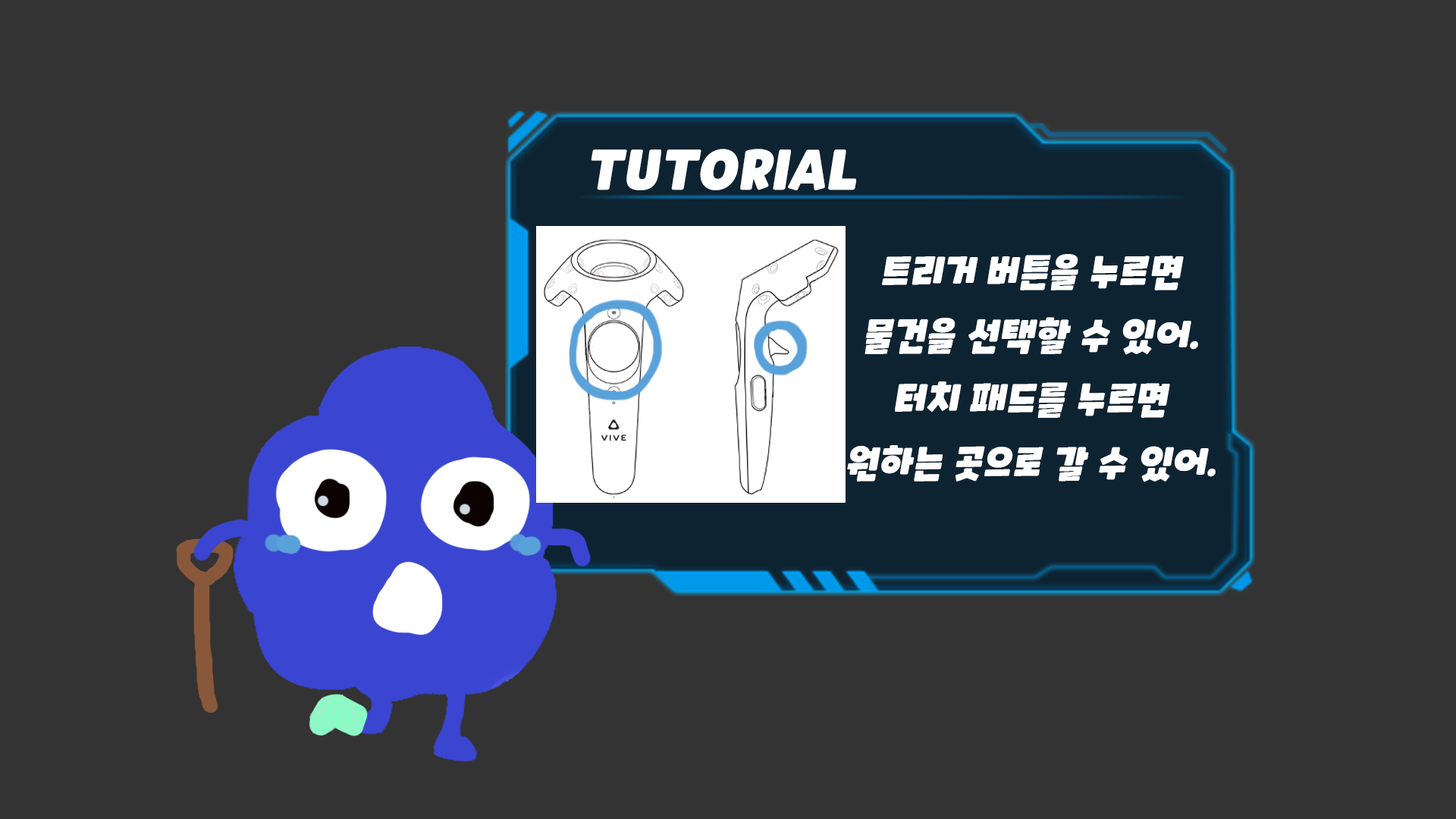
<style>
.page{position:relative;width:1456px;height:819px;background:#333333}
.page>*{position:absolute;margin:0}
.t1{font:54.6px "CookieRun-Black";color:#ffffff;font-style:italic}
.t2{font:36.4px "CookieRun-Black";color:#ffffff;font-style:italic}
</style>
<div class="page">
<p class="t1" style="left:591px;top:149px;width:265px;height:41px">TUTORIAL</p>
<p class="t2" style="left:847px;top:254px;width:369px;height:228px;text-align:center">트리거 버튼을 누르면<br>물건을 선택할 수 있어.<br>터치 패드를 누르면<br>원하는 곳으로 갈 수 있어.</p>
</div>
